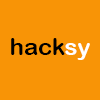
<style>
.page{position:relative;width:100px;height:100px;background:#f89406}
.page>*{position:absolute;margin:0}
.t1{font:24.2px "ArialRoundedMTBold";color:#000000}
.t2{font:24.2px "ArialRoundedMTBold";color:#f26522}
.t3{font:24.2px "ArialRoundedMTBold";color:#ffffff}
</style>
<div class="page">
<p class="t1" style="left:11px;top:38px;width:79px;height:22px"><span class="t2"><br></span>hack<span class="t3">sy</span></p>
</div>
